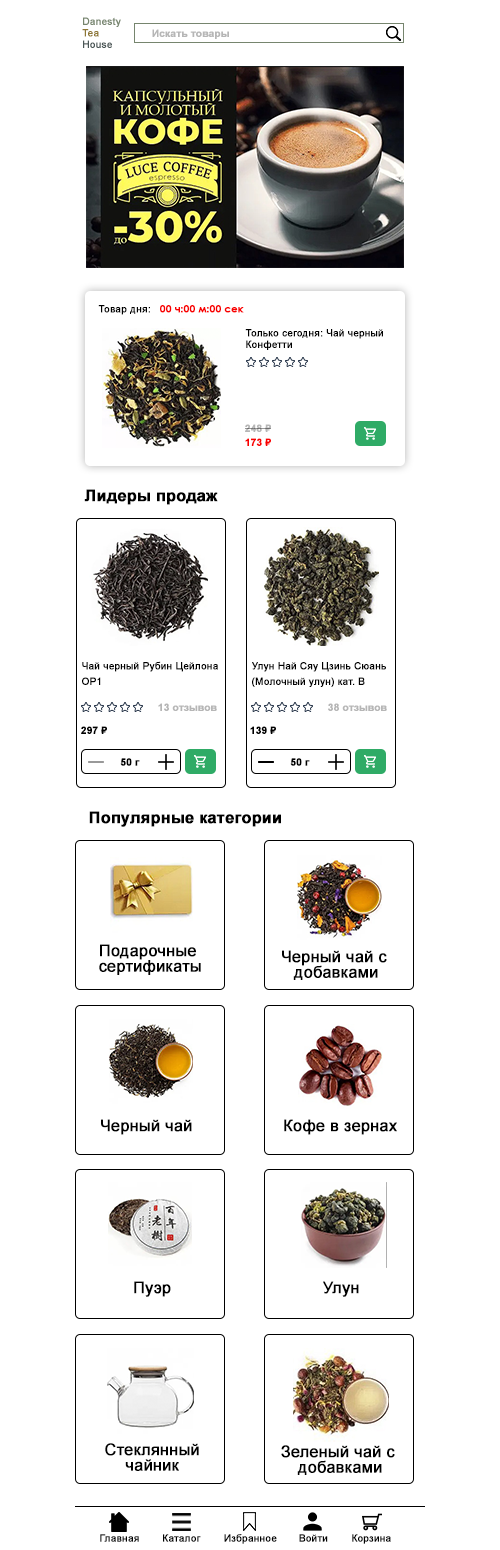
<style>
.page{position:relative;width:500px;height:1550px;background:#ffffff}
.page>*{position:absolute;margin:0}
.t1{font:10px/3.8px "ArialMT";color:#76856e;font-weight:bold}
.t2{font:10px/3.8px "ArialMT";color:#8e7734;font-weight:bold}
.t3{font:10px/3.8px "ArialMT";color:#4a5656;font-weight:bold}
.t4{font:10px "Arial-BoldMT";color:#b6b6b6;font-weight:bold}
.t5{font:10px "CenturyGothic-Bold";color:#f90000;font-weight:bold}
.t6{font:10px "ArialMT";color:#000000;font-weight:bold}
.t7{font:10px/3.8px "ArialMT";color:#000000;font-weight:bold}
.t8{font:10px "Arial-BoldMT";color:#f90000;font-weight:bold}
.t9{font:16px "Arial-BoldMT";color:#000000;font-weight:bold}
.t10{font:10px "Arial-BoldMT";color:#000000;font-weight:bold}
.t11{font:16px/3.8px "ArialMT";color:#000000;font-weight:bold}
.t12{font:16px "ArialMT";color:#000000;font-weight:bold}
</style>
<div class="page">
<p class="t1" style="left:82px;top:17px;width:39px;height:31px">Danesty <br><br><br><span class="t2">Tea <br><br><br></span><span class="t3">House</span></p>
<p class="t4" style="left:152px;top:29px;width:77px;height:10px">Искать товары</p>
<p class="t5" style="left:98px;top:305px;width:146px;height:10px"><span class="t6">Товар дня:   </span>00 ч:00 м:00 сек</p>
<p class="t7" style="left:245px;top:329px;width:138px;height:21px">Только сегодня: Чай черный <br><br><br>Конфетти</p>
<p class="t4" style="left:245px;top:424px;width:26px;height:8px">248 ₽</p>
<p class="t8" style="left:245px;top:438px;width:26px;height:8px">173 ₽</p>
<p class="t9" style="left:84px;top:489px;width:134px;height:16px">Лидеры продаж</p>
<p class="t7" style="left:82px;top:661px;width:136px;height:24px">Чай черный Рубин Цейлона <br><br><br><br>OP1</p>
<p class="t7" style="left:252px;top:662px;width:134px;height:25px">Улун Най Сяу Цзинь Сюань<br><br><br><br>(Молочный улун) кат. B</p>
<p class="t4" style="left:158px;top:703px;width:59px;height:8px">13 отзывов</p>
<p class="t4" style="left:328px;top:703px;width:59px;height:8px">38 отзывов</p>
<p class="t10" style="left:81px;top:726px;width:26px;height:8px">297 ₽</p>
<p class="t10" style="left:250px;top:726px;width:26px;height:8px">139 ₽</p>
<p class="t10" style="left:120px;top:758px;width:20px;height:8px">50 г</p>
<p class="t10" style="left:290px;top:758px;width:20px;height:8px">50 г</p>
<p class="t9" style="left:89px;top:811px;width:192px;height:16px">Популярные категории</p>
<p class="t11" style="left:99px;top:944px;width:102px;height:31px;text-align:center">Подарочные <br><br><br><br>сертификаты</p>
<p class="t11" style="left:282px;top:950px;width:105px;height:30px;text-align:center">Черный чай с <br><br><br><br>добавками</p>
<p class="t12" style="left:101px;top:1119px;width:91px;height:16px">Черный чай</p>
<p class="t12" style="left:284px;top:1119px;width:113px;height:16px">Кофе в зернах</p>
<p class="t12" style="left:134px;top:1281px;width:37px;height:16px">Пуэр</p>
<p class="t12" style="left:323px;top:1281px;width:36px;height:16px">Улун</p>
<p class="t11" style="left:105px;top:1443px;width:94px;height:28px;text-align:center">Стеклянный<br><br><br><br>чайник</p>
<p class="t11" style="left:281px;top:1445px;width:114px;height:30px;text-align:center">Зеленый чай с <br><br><br><br>добавками</p>
<p class="t6" style="left:100px;top:1534px;width:39px;height:8px">Главная</p>
<p class="t6" style="left:163px;top:1534px;width:38px;height:8px">Каталог</p>
<p class="t6" style="left:224px;top:1534px;width:53px;height:10px">Избранное</p>
<p class="t6" style="left:299px;top:1534px;width:29px;height:8px">Войти</p>
<p class="t6" style="left:352px;top:1534px;width:39px;height:10px">Корзина</p>
</div>
